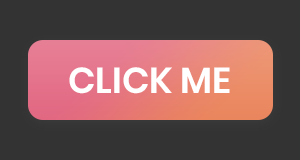
<style>
.page{position:relative;width:300px;height:160px;background:#333333}
.page>*{position:absolute;margin:0}
.t1{font:36px "Poppins-SemiBold";color:#ffffff}
</style>
<div class="page">
<p class="t1" style="left:69px;top:67px;width:161px;height:27px">CLICK ME</p>
</div>
